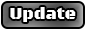
<style>
.page{position:relative;width:86px;height:30px;background:#000000}
.page>*{position:absolute;margin:0}
.t1{font:17.4px "BlackOpsOne-Regular";color:#ffffff}
</style>
<div class="page">
<p class="t1" style="left:10px;top:7px;width:66px;height:15px">Update</p>
</div>
